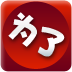
<style>
.page{position:relative;width:72px;height:72px}
.page>*{position:absolute;margin:0}
.t1{font:32.6px "DFHaiBaoW12";letter-spacing:-0.14em;color:#f6f4f6}
</style>
<div class="page">
<p class="t1" style="left:8px;top:12px;width:57px;height:45px;rotate:28deg">为了</p>
</div>
